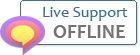
<style>
.page{position:relative;width:140px;height:55px;background:#ffffff}
.page>*{position:absolute;margin:0}
.t1{font:16px "Candara";color:#40738b}
.t2{font:20px "Candara-Bold";color:#737373}
</style>
<div class="page">
<p class="t1" style="left:43px;top:7px;width:85px;height:14px">Live Support</p>
<p class="t2" style="left:53px;top:25px;width:72px;height:13px">OFFLINE</p>
</div>
